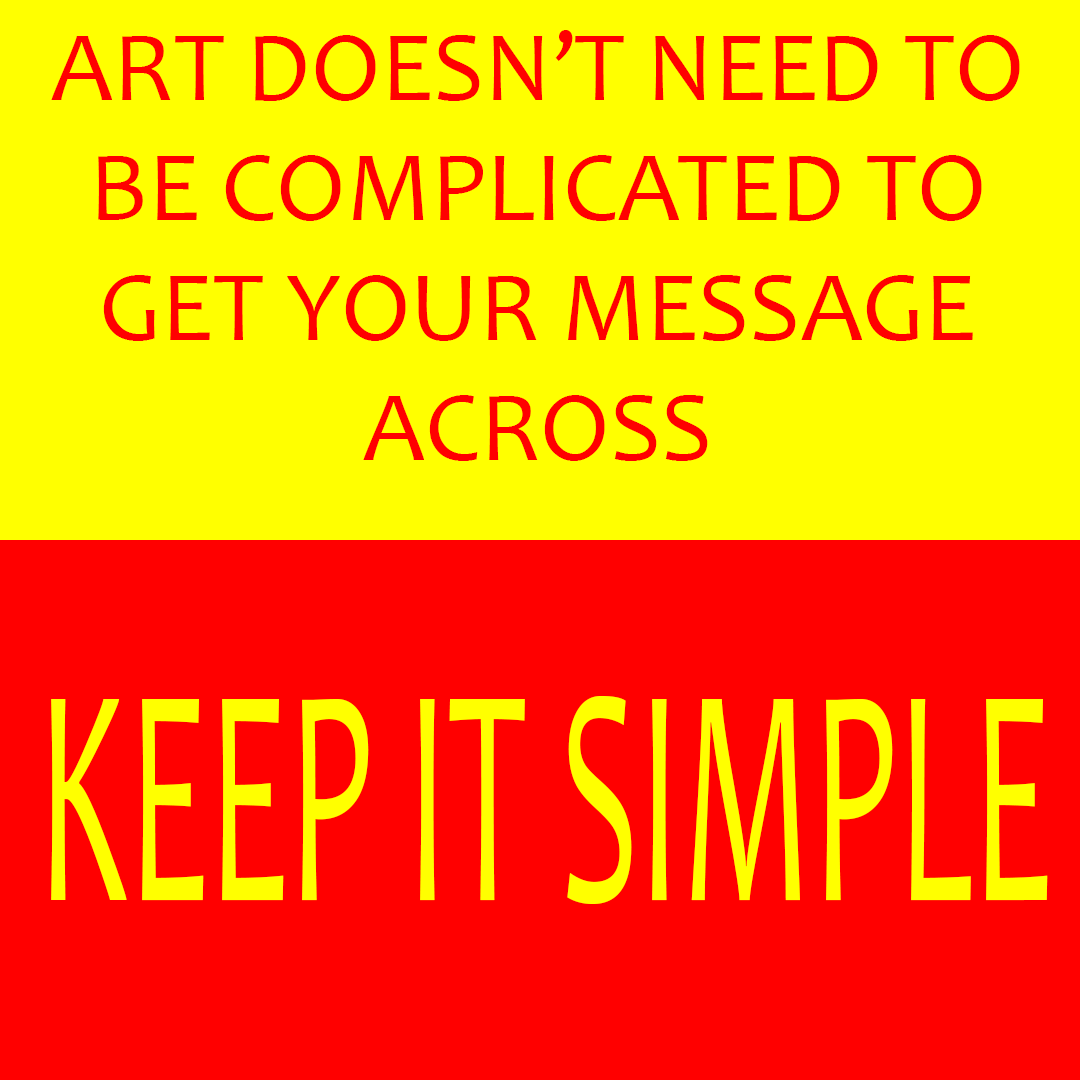
<style>
.page{position:relative;width:1080px;height:1080px;background:#ffff00}
.page>*{position:absolute;margin:0}
.t1{font:100px "Candara";color:#ff0000}
.t2{font:316.4px "Candara";color:#ffff00;scale:0.49 1}
</style>
<div class="page">
<p class="t1" style="left:51px;top:30px;width:969px;height:431px;text-align:center">ART DOESN’T NEED TO BE COMPLICATED TO GET YOUR MESSAGE ACROSS</p>
<p class="t2" style="left:51px;top:696px;width:997px;height:208px">KEEP IT SIMPLE</p>
</div>
